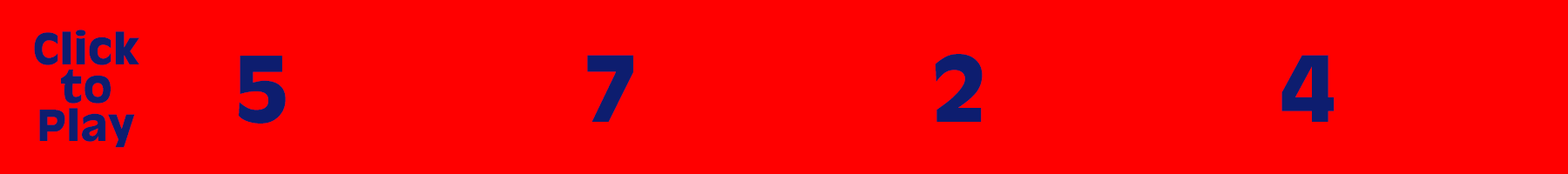
<style>
.page{position:relative;width:1568px;height:174px;background:#ff0000}
.page>*{position:absolute;margin:0}
.t1{font:41.8px/26.1px "AntiqueOlive-Bold";letter-spacing:0.01em;color:#0d1d6f}
.t2{font:87.1px "AntiqueOlive-Bold";letter-spacing:0.01em;color:#0d1d6f}
</style>
<div class="page">
<p class="t1" style="left:34px;top:30px;width:105px;height:118px;text-align:center">Click<br>to<br>Play</p>
<p class="t2" style="left:239px;top:56px;width:47px;height:68px">5</p>
<p class="t2" style="left:587px;top:55px;width:46px;height:67px">7</p>
<p class="t2" style="left:935px;top:54px;width:48px;height:68px">2</p>
<p class="t2" style="left:1281px;top:55px;width:54px;height:67px">4</p>
</div>
